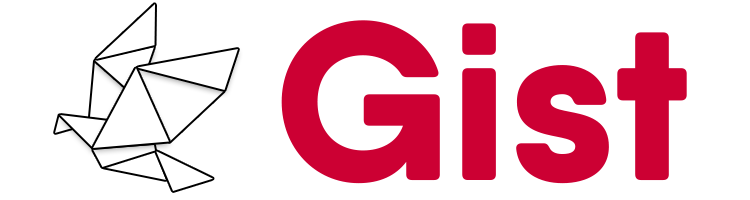
<style>
.page{position:relative;width:750px;height:200px;background:#ffffff}
.page>*{position:absolute;margin:0}
.t1{font:223.6px "QanelasSoftDEMO-ExtraBold";color:#cc0033}
</style>
<div class="page">
<p class="t1" style="left:281px;top:20px;width:406px;height:164px">Gist</p>
</div>
